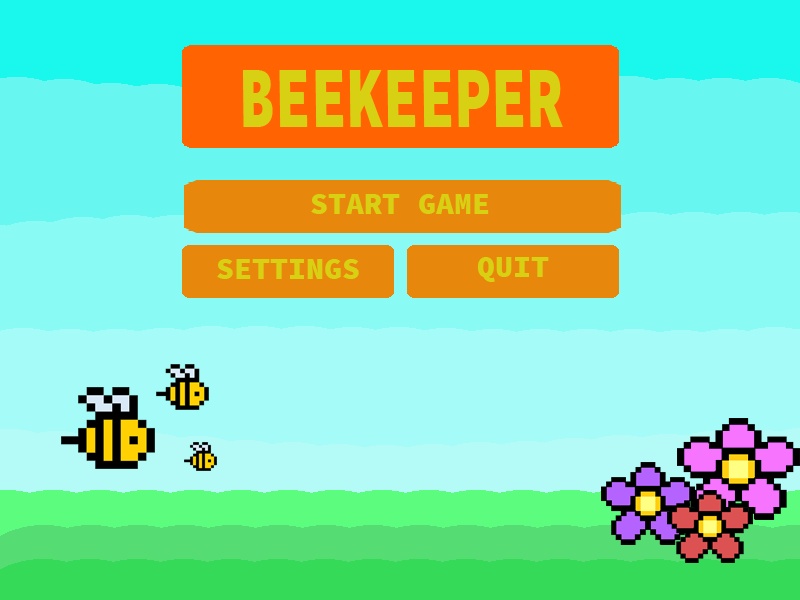
<style>
.page{position:relative;width:800px;height:600px}
.page>*{position:absolute;margin:0}
.t1{font:87.3px "SourceCodePro-Black";color:#d8d113;scale:0.69 1}
.t2{font:30px "SourceCodePro-Black";color:#d8d113}
</style>
<div class="page">
<p class="t1" style="left:243px;top:70px;width:320px;height:57px">BEEKEEPER</p>
<p class="t2" style="left:311px;top:194px;width:178px;height:20px">START GAME</p>
<p class="t2" style="left:477px;top:257px;width:72px;height:25px">QUIT</p>
<p class="t2" style="left:217px;top:259px;width:142px;height:20px">SETTINGS</p>
</div>
